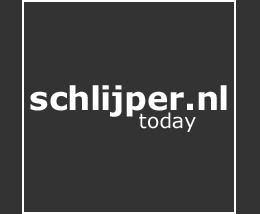
<style>
.page{position:relative;width:260px;height:214px;background:#333333}
.page>*{position:absolute;margin:0}
.t1{font:32.6px "Verdana-Bold";color:#ffffff}
.t2{font:20.3px "Verdana";color:#ffffff}
</style>
<div class="page">
<p class="t1" style="left:30px;top:85px;width:197px;height:32px">schlijper.nl</p>
<p class="t2" style="left:139px;top:112px;width:57px;height:20px">today</p>
</div>
